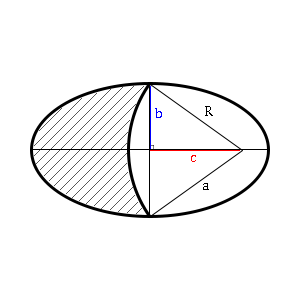
<style>
.page{position:relative;width:300px;height:300px;background:#ffffff}
.page>*{position:absolute;margin:0}
.t1{font:14px "CambriaMath";color:#0000ff}
.t2{font:14px "CambriaMath";color:#000000}
.t3{font:14px "CambriaMath";color:#ff0000}
</style>
<div class="page">
<p class="t1" style="left:155px;top:108px;width:7px;height:10px">b</p>
<p class="t2" style="left:205px;top:106px;width:8px;height:10px">R</p>
<p class="t3" style="left:191px;top:155px;width:5px;height:7px">c</p>
<p class="t2" style="left:203px;top:183px;width:6px;height:7px">a</p>
</div>
